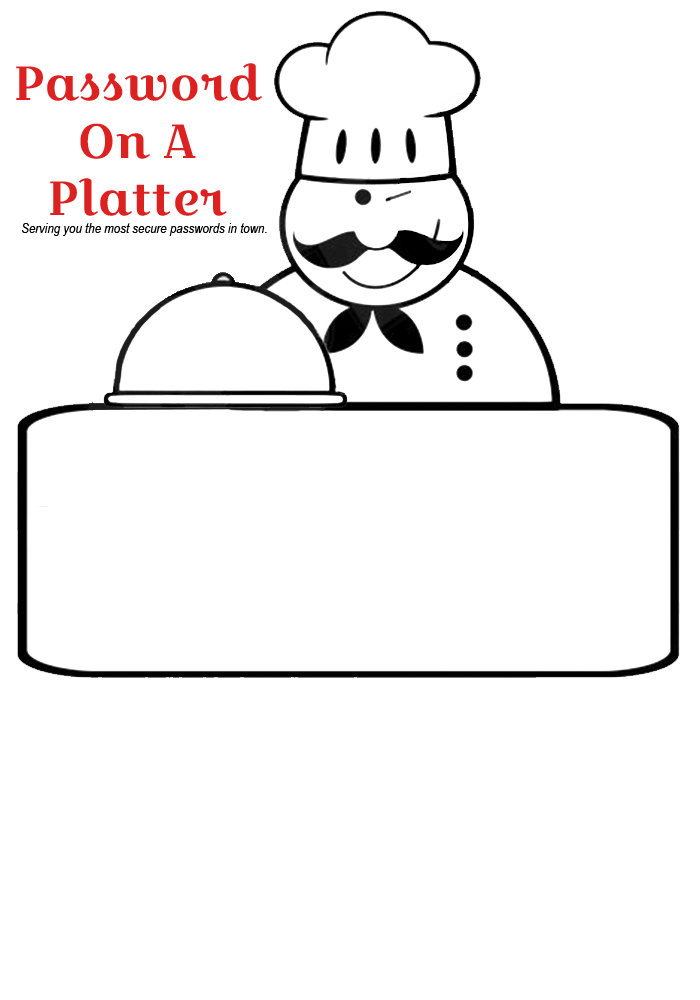
<style>
.page{position:relative;width:700px;height:1000px;background:#ffffff}
.page>*{position:absolute;margin:0}
.t1{font:48px "CroissantOne-Regular";color:#dc2121}
.t2{font:14px "ArialNarrow-Italic";color:#000000}
</style>
<div class="page">
<p class="t1" style="left:16px;top:63px;width:246px;height:153px;text-align:center">Password <br>On A <br>Platter</p>
<p class="t2" style="left:22px;top:223px;width:245px;height:13px">Serving you the most secure passwords in town.</p>
</div>
